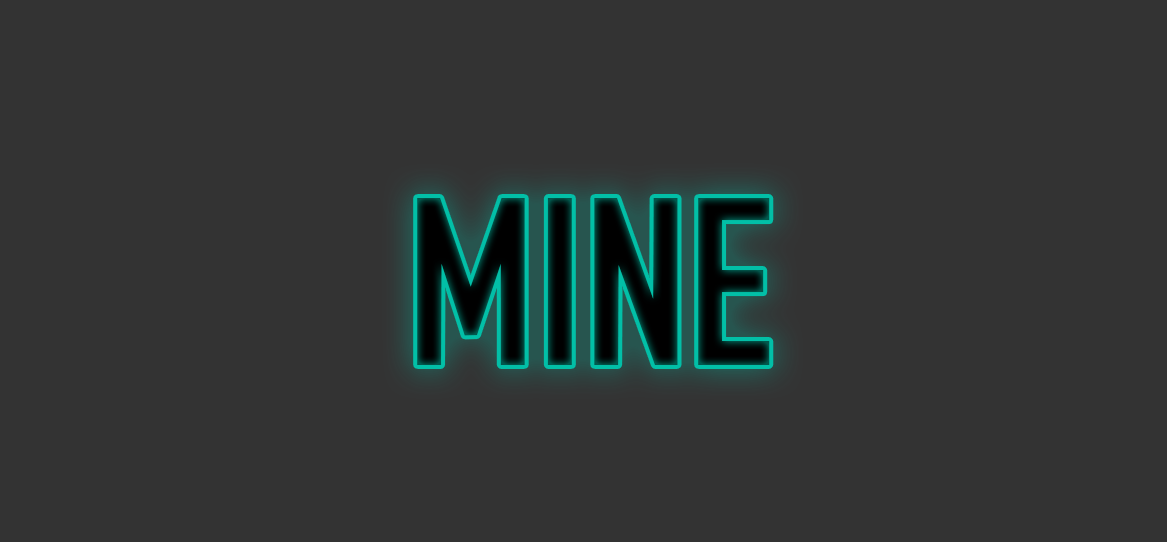
<style>
.page{position:relative;width:1167px;height:542px;background:#333333}
.page>*{position:absolute;margin:0}
.t1{font:233.7px "DINEngschrift";color:#000b0a;text-transform:uppercase}
</style>
<div class="page">
<p class="t1" style="left:417px;top:198px;width:353px;height:167px">mine</p>
</div>
